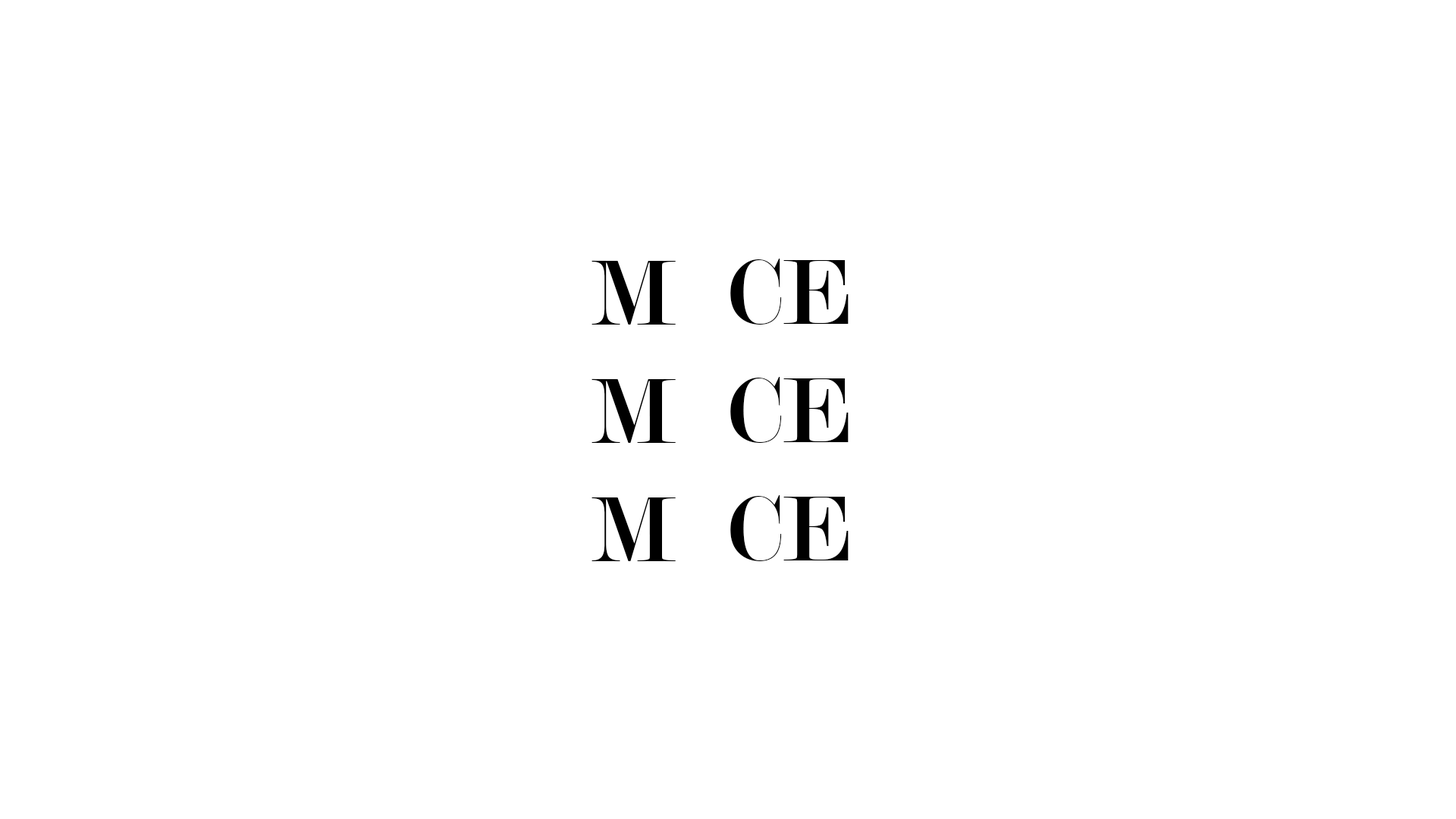
<style>
.page{position:relative;width:1456px;height:819px;background:#ffffff}
.page>*{position:absolute;margin:0}
.t1{font:98.6px "Modern-Regular";color:#000000}
</style>
<div class="page">
<p class="t1" style="left:591px;top:260px;width:85px;height:301px;text-align:center">M<br>M<br>M</p>
<p class="t1" style="left:730px;top:259px;width:119px;height:302px;text-align:center">CE<br>CE<br>CE</p>
</div>
